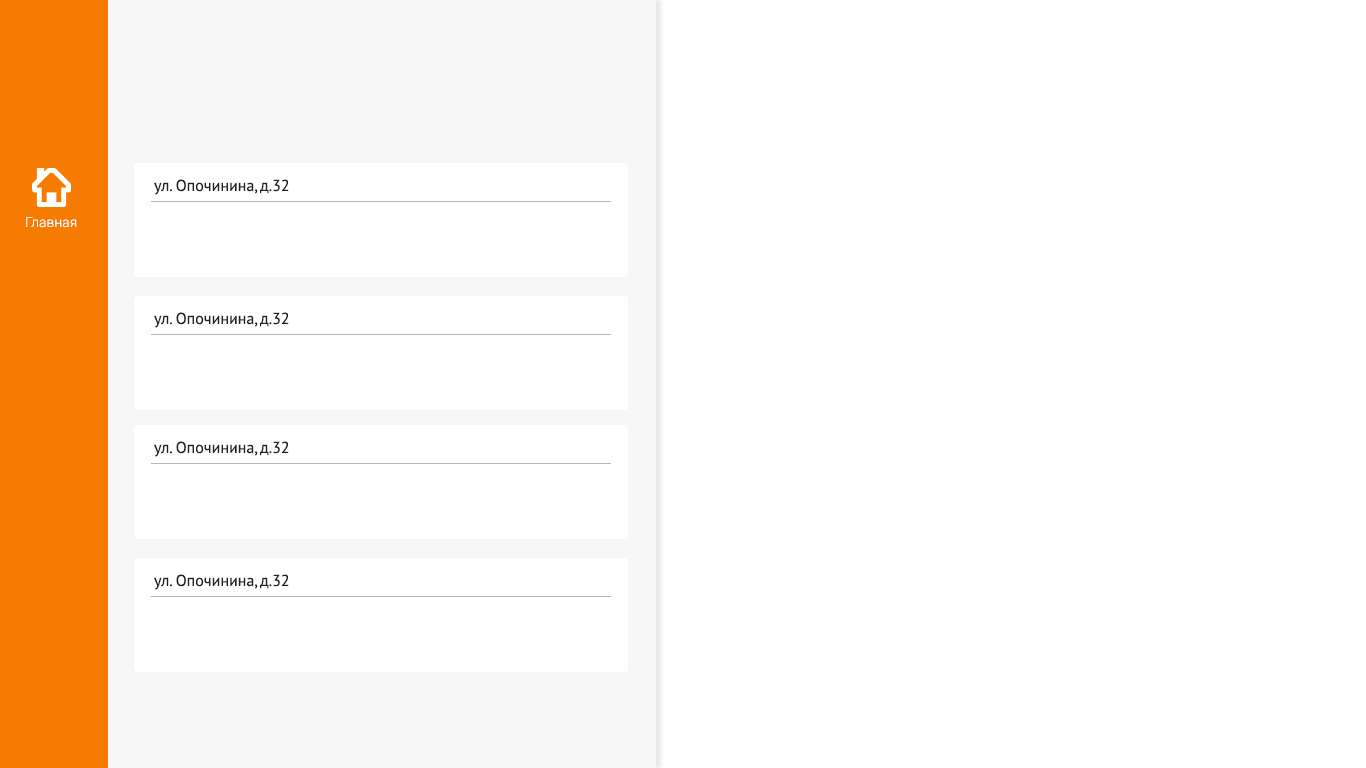
<style>
.page{position:relative;width:1366px;height:768px;background:#ffffff}
.page>*{position:absolute;margin:0}
.t1{font:16px "PTSans-Regular";color:#212121}
.t2{font:14px "Roboto-Light";color:#ffffff}
</style>
<div class="page">
<p class="t1" style="left:154px;top:179px;width:135px;height:16px">ул. Опочинина, д.32</p>
<p class="t2" style="left:26px;top:217px;width:51px;height:11px">Главная</p>
<p class="t1" style="left:154px;top:312px;width:135px;height:16px">ул. Опочинина, д.32</p>
<p class="t1" style="left:154px;top:441px;width:135px;height:16px">ул. Опочинина, д.32</p>
<p class="t1" style="left:154px;top:574px;width:135px;height:16px">ул. Опочинина, д.32</p>
</div>
